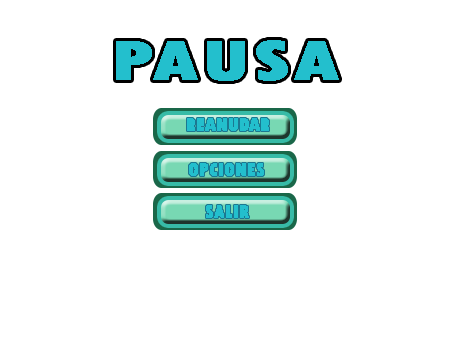
<style>
.page{position:relative;width:454px;height:340px;background:#ffffff}
.page>*{position:absolute;margin:0}
.t1{font:57.6px "TwCenMT-CondensedExtraBold";color:#23bfcd;font-weight:bold;scale:1.43 1}
.t2{font:18px "TwCenMT-CondensedExtraBold";color:#23bfcd;font-weight:bold}
.t3{font:18.3px "TwCenMT-CondensedExtraBold";color:#23bfcd;font-weight:bold}
</style>
<div class="page">
<p class="t1" style="left:116px;top:40px;width:223px;height:41px">PAUSA</p>
<p class="t2" style="left:187px;top:118px;width:82px;height:13px">REANUDAR</p>
<p class="t3" style="left:189px;top:163px;width:75px;height:13px">OPCIONES</p>
<p class="t3" style="left:206px;top:205px;width:43px;height:13px">SALIR</p>
</div>
